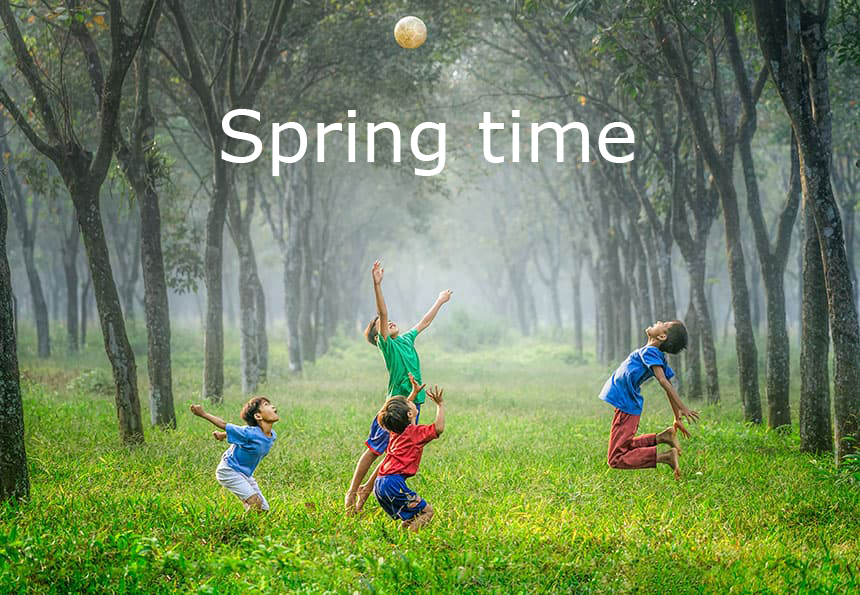
<style>
.page{position:relative;width:860px;height:595px}
.page>*{position:absolute;margin:0}
.t1{font:72px "Verdana";color:#ffffff}
</style>
<div class="page">
<p class="t1" style="left:221px;top:109px;width:414px;height:67px">Spring time</p>
</div>
